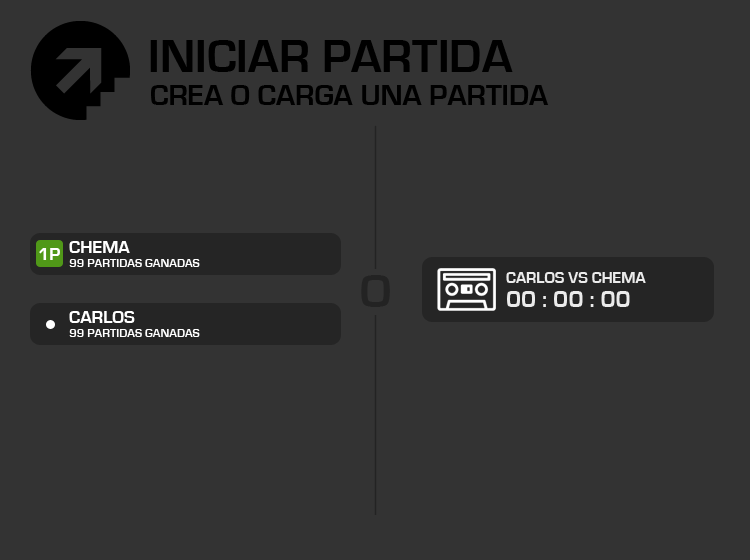
<style>
.page{position:relative;width:750px;height:560px;background:#333333}
.page>*{position:absolute;margin:0}
.t1{font:48px "EurostileBold";color:#000000}
.t2{font:30px "EurostileBold";color:#000000}
.t3{font:18px "EurostileBold";color:#ffffff}
.t4{font:12px "EurostileBold";color:#ffffff}
.t5{font:48px "EurostileBold";color:#232323}
.t6{font:16px "EurostileBold";color:#ebebeb}
.t7{font:24px "EurostileBold";color:#ebebeb}
</style>
<div class="page">
<p class="t1" style="left:150px;top:40px;width:363px;height:32px">INICIAR PARTIDA</p>
<p class="t2" style="left:151px;top:85px;width:398px;height:20px">CREA O CARGA UNA PARTIDA</p>
<p class="t3" style="left:69px;top:241px;width:61px;height:12px">CHEMA</p>
<p class="t3" style="left:39px;top:248px;width:21px;height:12px">1P</p>
<p class="t4" style="left:69px;top:259px;width:131px;height:8px">99 PARTIDAS GANADAS</p>
<p class="t5" style="left:361px;top:275px;width:29px;height:32px">O</p>
<p class="t6" style="left:506px;top:272px;width:140px;height:11px">CARLOS VS CHEMA</p>
<p class="t7" style="left:507px;top:291px;width:123px;height:16px">00 : 00 : 00</p>
<p class="t3" style="left:69px;top:311px;width:66px;height:12px">CARLOS</p>
<p class="t4" style="left:69px;top:329px;width:131px;height:8px">99 PARTIDAS GANADAS</p>
</div>
